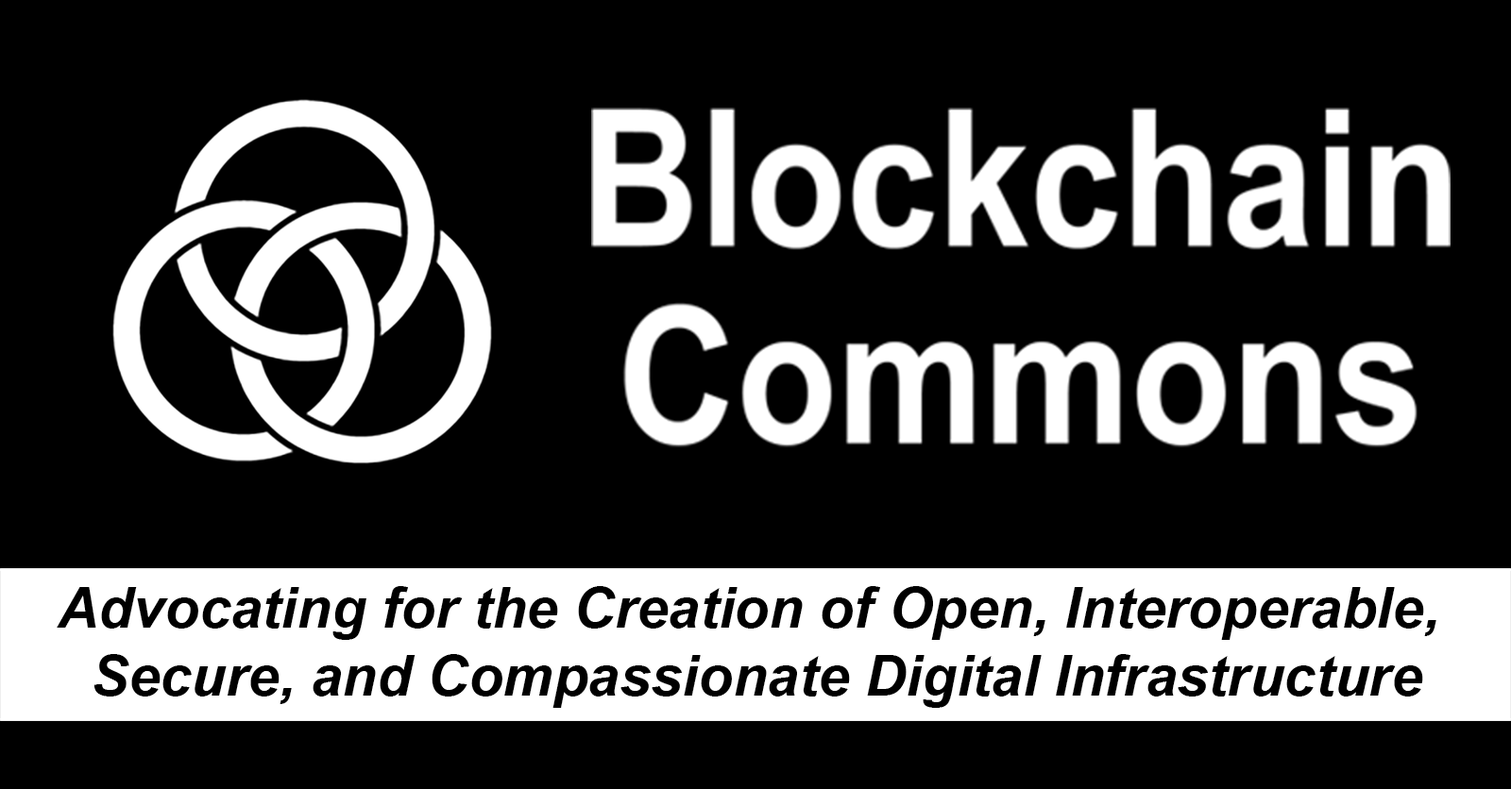
<style>
.page{position:relative;width:1511px;height:789px;background:#000000}
.page>*{position:absolute;margin:0}
.t1{font:56.7px "Arial-BoldItalicMT";color:#000000}
</style>
<div class="page">
<p class="t1" style="left:57px;top:586px;width:1379px;height:122px;text-align:center">Advocating for the Creation of Open, Interoperable, <br>Secure, and Compassionate Digital Infrastructure</p>
</div>
